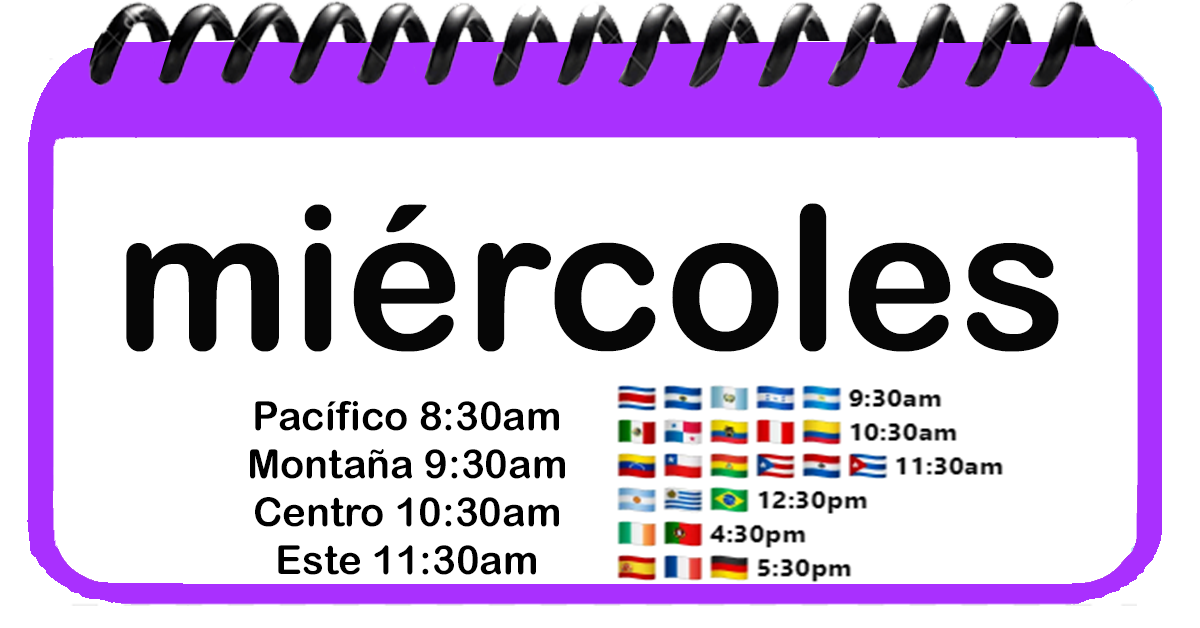
<style>
.page{position:relative;width:1200px;height:628px;background:#ffffff}
.page>*{position:absolute;margin:0}
.t1{font:200px "ArialRoundedMTBold";color:#060606}
.t2{font:40px "ArialRoundedMTBold";color:#000000}
</style>
<div class="page">
<p class="t1" style="left:126px;top:203px;width:933px;height:149px">miércoles</p>
<p class="t2" style="left:250px;top:401px;width:315px;height:174px;text-align:center">Pacífico 8:30am<br>Montaña 9:30am<br>Centro 10:30am<br>Este 11:30am</p>
</div>
